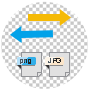
<style>
.page{position:relative;width:90px;height:90px;background:#ffffff}
.page>*{position:absolute;margin:0}
.t1{font:7px "Arial-BoldMT"}
.t2{font:7px "Arial-BoldMT";color:#232323}
</style>
<div class="page">
<p class="t1" style="left:20px;top:59px;width:11px;height:5px">png</p>
<p class="t2" style="left:48px;top:58px;width:13px;height:5px">JPG</p>
</div>
